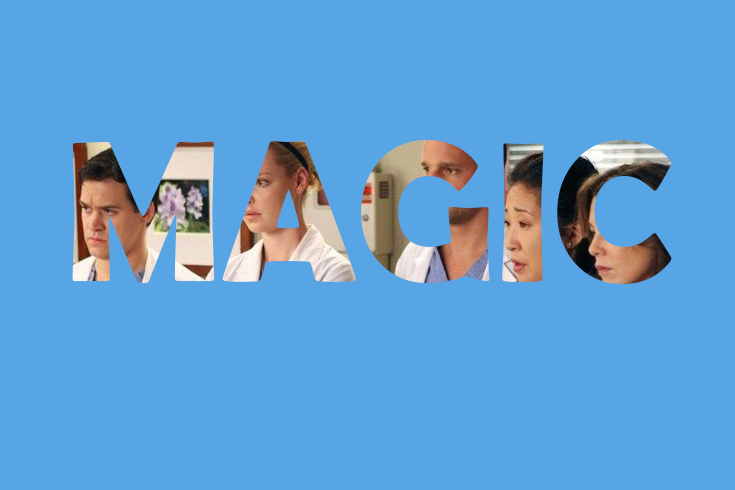
<style>
.page{position:relative;width:735px;height:490px;background:#58a5e5}
.page>*{position:absolute;margin:0}
.t1{font:201.2px "BerlinSansFBDemi-Bold";scale:0.96 1}
</style>
<div class="page">
<p class="t1" style="left:72px;top:139px;width:600px;height:145px">MAGIC</p>
</div>
